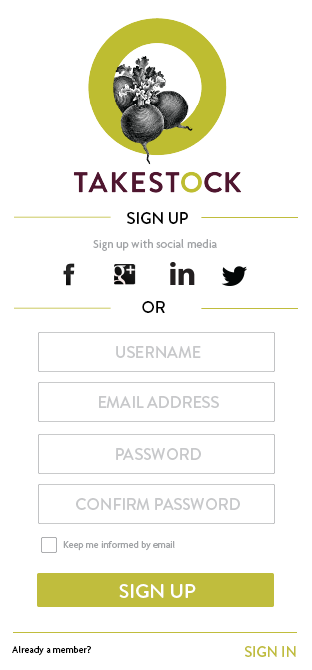
<style>
.page{position:relative;width:312px;height:670px;background:#ffffff}
.page>*{position:absolute;margin:0}
.t1{font:16px "BrandonGrotesque-Medium";color:#000000}
.t2{font:12px "Agenda-Medium";color:#a1a3a6}
.t3{font:16px "BrandonGrotesque-Medium";color:#c7c8ca}
.t4{font:10px "Agenda-Medium";color:#a1a3a6}
.t5{font:20px "BrandonGrotesque-Medium";color:#ffffff}
.t6{font:10px "Agenda-Medium";color:#000000}
.t7{font:14.6px "BrandonGrotesque-Medium";color:#c0bd3d}
</style>
<div class="page">
<p class="t1" style="left:127px;top:212px;width:61px;height:12px">SIGN UP</p>
<p class="t2" style="left:93px;top:239px;width:124px;height:12px">Sign up with social media</p>
<p class="t1" style="left:142px;top:301px;width:23px;height:12px">OR</p>
<p class="t3" style="left:116px;top:346px;width:85px;height:12px">USERNAME</p>
<p class="t3" style="left:99px;top:396px;width:120px;height:12px">EMAIL ADDRESS</p>
<p class="t3" style="left:116px;top:448px;width:85px;height:12px">PASSWORD</p>
<p class="t3" style="left:76px;top:498px;width:164px;height:12px">CONFIRM PASSWORD</p>
<p class="t4" style="left:63px;top:541px;width:112px;height:10px">Keep me informed by email</p>
<p class="t5" style="left:119px;top:584px;width:77px;height:14px">SIGN UP</p>
<p class="t6" style="left:12px;top:646px;width:79px;height:10px">Already a member?</p>
<p class="t7" style="left:245px;top:646px;width:51px;height:11px">SIGN IN</p>
</div>
